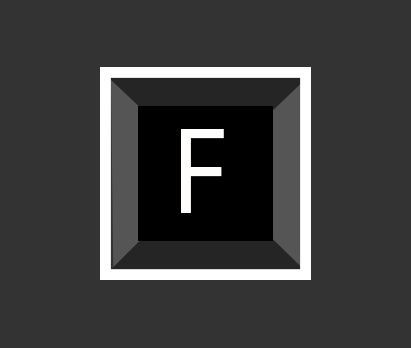
<style>
.page{position:relative;width:411px;height:348px;background:#333333}
.page>*{position:absolute;margin:0}
.t1{font:120.4px "Gadugi";color:#fffcfc}
</style>
<div class="page">
<p class="t1" style="left:181px;top:129px;width:43px;height:84px">F</p>
</div>
